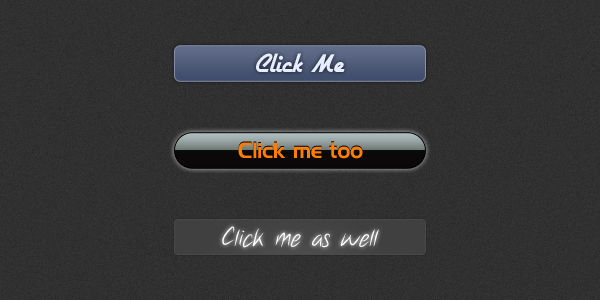
<style>
.page{position:relative;width:600px;height:300px}
.page>*{position:absolute;margin:0}
.t1{font:30px "Airstream";color:#e5edff}
.t2{font:20px "HighlandGothicFLF";color:#ff7d00}
.t3{font:24px "Notethis";color:#ffffff}
</style>
<div class="page">
<p class="t1" style="left:256px;top:53px;width:89px;height:19px">Click Me</p>
<p class="t2" style="left:238px;top:142px;width:125px;height:17px">Click me too</p>
<p class="t3" style="left:222px;top:226px;width:157px;height:22px">Click me as well</p>
</div>
